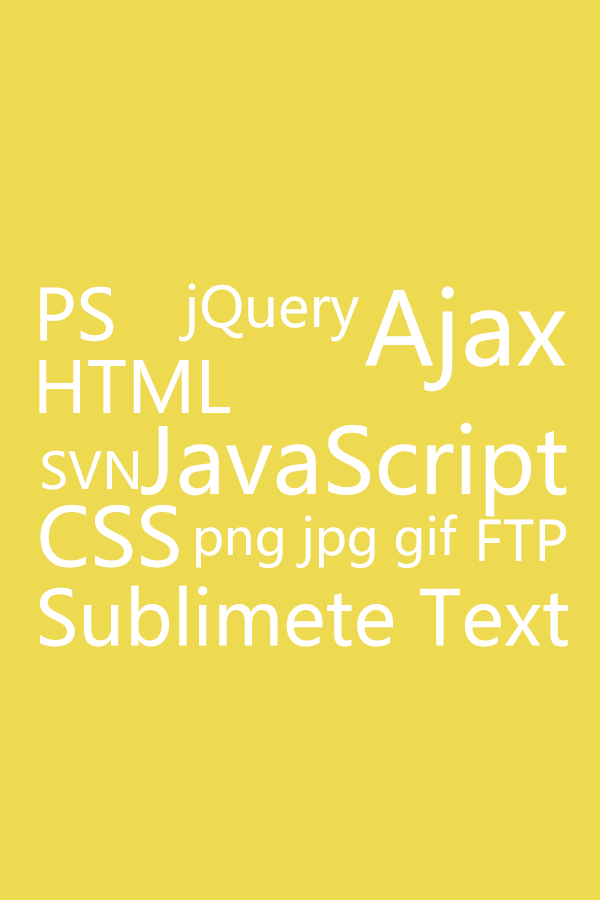
<style>
.page{position:relative;width:600px;height:900px;background:#eeda50}
.page>*{position:absolute;margin:0}
.t1{font:70px "MicrosoftYaHei";color:#ffffff}
.t2{font:55px "MicrosoftYaHei";color:#ffffff}
.t3{font:100px "MicrosoftYaHei";color:#ffffff}
.t4{font:90px "MicrosoftYaHei";color:#ffffff}
.t5{font:50px "MicrosoftYaHei";color:#ffffff}
.t6{font:80px "MicrosoftYaHei";color:#ffffff}
.t7{font:75px "MicrosoftYaHei";color:#ffffff}
</style>
<div class="page">
<p class="t1" style="left:40px;top:286px;width:74px;height:56px">PS</p>
<p class="t2" style="left:179px;top:283px;width:180px;height:59px">jQuery</p>
<p class="t3" style="left:365px;top:286px;width:201px;height:106px">Ajax</p>
<p class="t1" style="left:39px;top:360px;width:191px;height:53px">HTML</p>
<p class="t4" style="left:141px;top:422px;width:426px;height:95px">JavaScript</p>
<p class="t5" style="left:42px;top:450px;width:96px;height:40px">SVN</p>
<p class="t6" style="left:40px;top:505px;width:139px;height:63px">CSS</p>
<p class="t5" style="left:196px;top:514px;width:261px;height:54px">png jpg gif</p>
<p class="t2" style="left:479px;top:519px;width:87px;height:42px">FTP</p>
<p class="t7" style="left:40px;top:585px;width:528px;height:62px">Sublimete Text</p>
</div>
